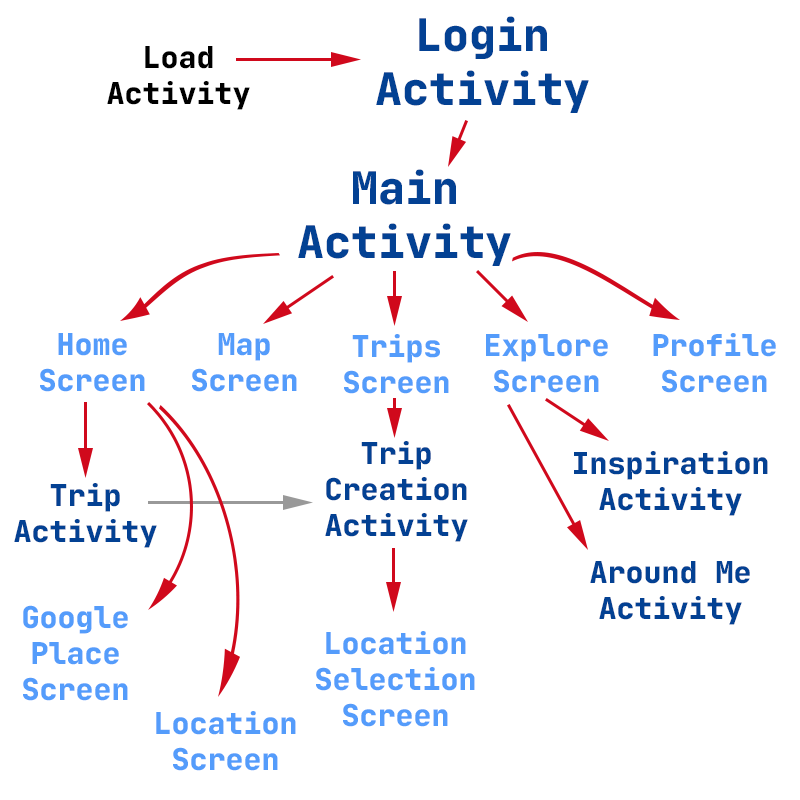
<style>
.page{position:relative;width:800px;height:800px;background:#ffffff}
.page>*{position:absolute;margin:0}
.t1{font:45px "JetBrainsMono-ExtraBold";color:#034193}
.t2{font:30px "JetBrainsMono-ExtraBold";color:#000000}
.t3{font:30px "JetBrainsMono-ExtraBold";color:#549cfb}
.t4{font:30px "JetBrainsMono-ExtraBold";color:#034193}
</style>
<div class="page">
<p class="t1" style="left:376px;top:16px;width:213px;height:97px;text-align:center">Login<br>Activity</p>
<p class="t2" style="left:107px;top:46px;width:143px;height:64px;text-align:center">Load<br>Activity</p>
<p class="t1" style="left:298px;top:169px;width:213px;height:97px;text-align:center">Main<br>Activity</p>
<p class="t3" style="left:40px;top:333px;width:105px;height:59px;text-align:center">Home<br>Screen</p>
<p class="t3" style="left:192px;top:333px;width:105px;height:59px;text-align:center">Map<br>Screen</p>
<p class="t3" style="left:344px;top:334px;width:105px;height:60px;text-align:center">Trips<br>Screen</p>
<p class="t3" style="left:486px;top:334px;width:122px;height:59px;text-align:center">Explore<br>Screen</p>
<p class="t3" style="left:653px;top:333px;width:123px;height:60px;text-align:center">Profile<br>Screen</p>
<p class="t4" style="left:325px;top:441px;width:143px;height:101px;text-align:center">Trip<br>Creation<br>Activity</p>
<p class="t4" style="left:574px;top:451px;width:194px;height:65px;text-align:center">Inspiration<br>Activity</p>
<p class="t4" style="left:14px;top:483px;width:143px;height:65px;text-align:center">Trip<br>Activity</p>
<p class="t4" style="left:590px;top:561px;width:160px;height:64px;text-align:center">Around Me<br>Activity</p>
<p class="t3" style="left:23px;top:605px;width:105px;height:96px;text-align:center">Google<br>Place<br>Screen</p>
<p class="t3" style="left:316px;top:631px;width:159px;height:96px;text-align:center">Location<br>Selection<br>Screen</p>
<p class="t3" style="left:156px;top:711px;width:140px;height:60px;text-align:center">Location<br>Screen</p>
</div>
